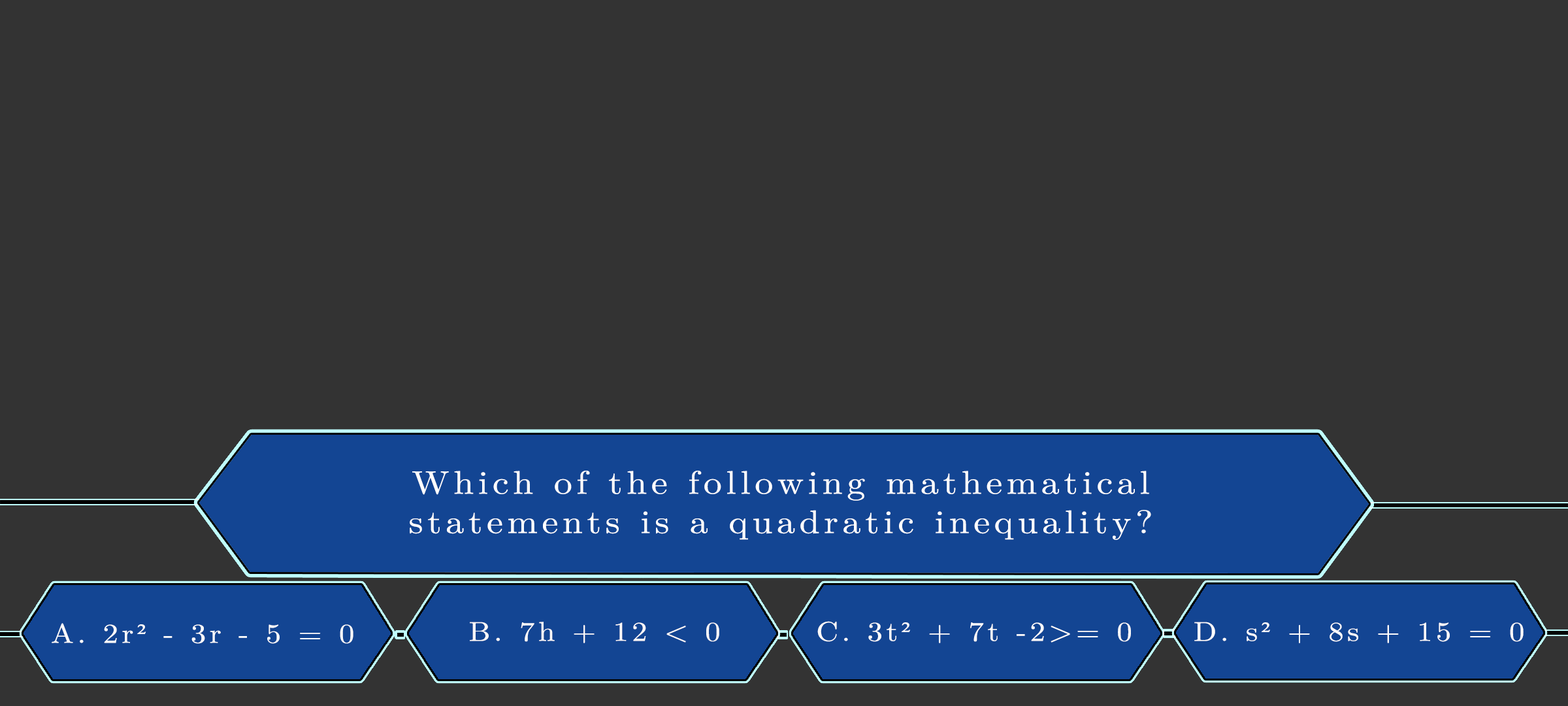
<style>
.page{position:relative;width:1568px;height:706px;background:#333333}
.page>*{position:absolute;margin:0}
.t1{font:32.7px/39.3px "LatinModernMath-Regular";letter-spacing:0.115em;color:#ffffff;scale:1.12 1}
.t2{font:27.2px "LatinModernMath-Regular";letter-spacing:0.115em;color:#fdfdfd;scale:1.12 1}
.t3{font:27.2px "TimesNewRomanPSMT";letter-spacing:0.115em;color:#fdfdfd;scale:1.12 1}
.t4{font:27.2px "LatinModernMath-Regular";letter-spacing:0.115em;color:#fcf9f9;scale:1.12 1}
.t5{font:27.2px "LatinModernMath-Regular";letter-spacing:0.115em;color:#fdfcfc;scale:1.12 1}
.t6{font:27.2px "TimesNewRomanPSMT";letter-spacing:0.115em;color:#fdfcfc;scale:1.12 1}
.t7{font:27.2px "LatinModernMath-Regular";letter-spacing:0.115em;color:#fffdfd;scale:1.12 1}
.t8{font:27.2px "TimesNewRomanPSMT";letter-spacing:0.115em;color:#fffdfd;scale:1.12 1}
</style>
<div class="page">
<p class="t1" style="left:410px;top:470px;width:741px;height:70px;text-align:center">Which of the following mathematical<br>statements is a quadratic inequality?</p>
<p class="t2" style="left:52px;top:623px;width:301px;height:21px">A. 2r<span class="t3">²</span> - 3r - 5 = 0</p>
<p class="t4" style="left:470px;top:621px;width:249px;height:22px">B. 7h + 12 &lt; 0</p>
<p class="t5" style="left:817px;top:621px;width:314px;height:22px">C. 3t<span class="t6">²</span> + 7t -2&gt;= 0</p>
<p class="t7" style="left:1194px;top:621px;width:330px;height:22px">D. s<span class="t8">²</span> + 8s + 15 = 0</p>
</div>
